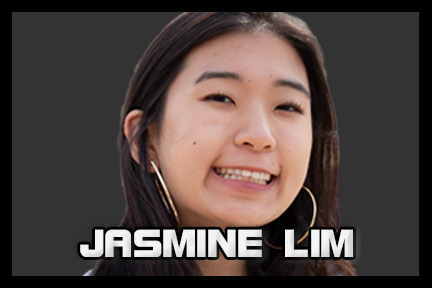
<style>
.page{position:relative;width:432px;height:288px;background:#333333}
.page>*{position:absolute;margin:0}
.t1{font:41.7px "BolsterBold";color:#f3f3f3}
</style>
<div class="page">
<p class="t1" style="left:80px;top:229px;width:273px;height:28px">JASMINE LIM</p>
</div>
